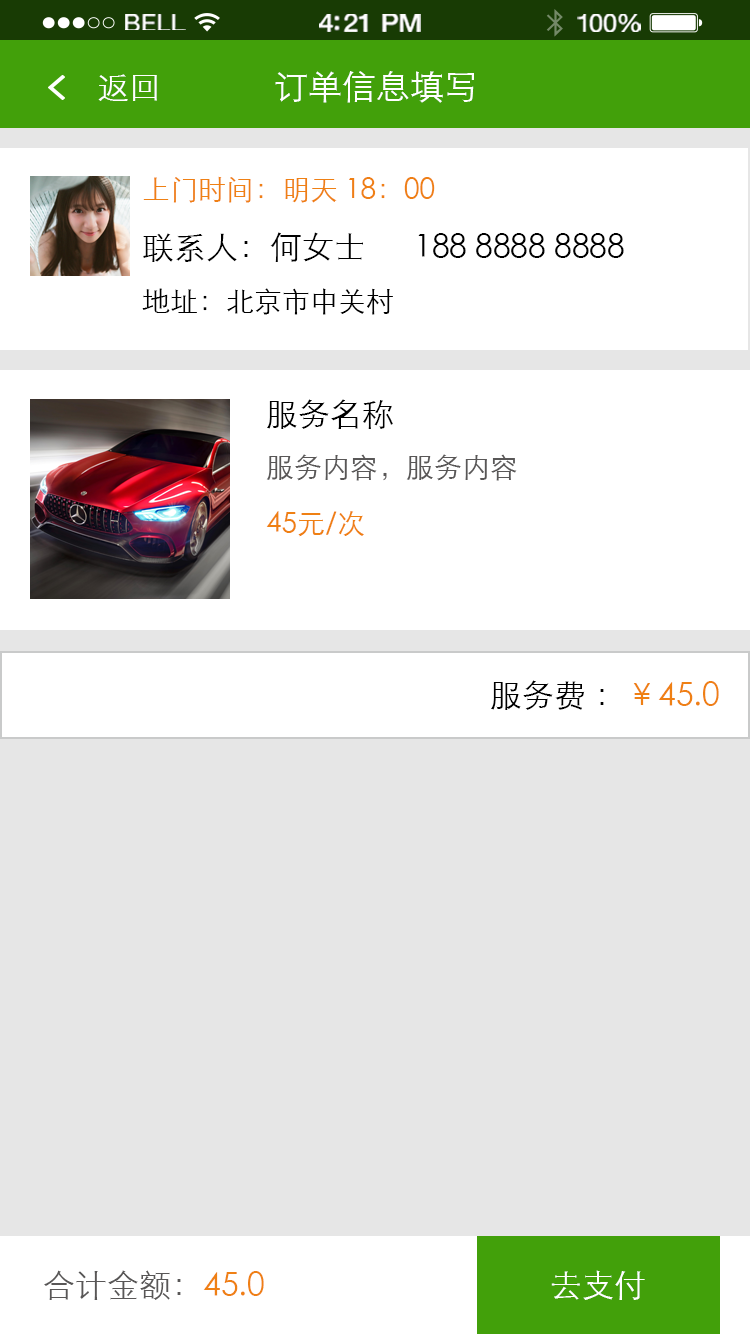
<style>
.page{position:relative;width:750px;height:1334px;background:#e6e6e6}
.page>*{position:absolute;margin:0}
.t1{font:23.3px "HelveticaNeue";letter-spacing:0.02em;color:#ffffff;scale:1.06 1}
.t2{font:25.3px "HelveticaNeue-Medium";letter-spacing:-0.02em;color:#ffffff;scale:1.06 1}
.t3{font:24.3px "HelveticaNeue";letter-spacing:-0.02em;color:#ffffff;scale:1.06 1}
.t4{font:32px "STXihei";color:#ffffff}
.t5{font:34px "STXihei";color:#ffffff}
.t6{font:32px/56px "STXihei";color:#000000}
.t7{font:28px/56px "STXihei";color:#ef8014}
.t8{font:28px/56px "STXihei";color:#000000}
.t9{font:28px/56px "STXihei";color:#595757}
.t10{font:28px/56px "STXihei";color:#ef8013}
.t11{font:32px "STXihei";color:#000000}
.t12{font:32px "STXihei";color:#ef8014}
.t13{font:32px "STXihei";color:#595757}
</style>
<div class="page">
<p class="t1" style="left:125px;top:14px;width:61px;height:16px">BELL</p>
<p class="t2" style="left:319px;top:14px;width:102px;height:18px">4:21 PM</p>
<p class="t3" style="left:577px;top:14px;width:64px;height:18px">100%</p>
<p class="t4" style="left:98px;top:74px;width:59px;height:27px">返回</p>
<p class="t5" style="left:275px;top:71px;width:199px;height:32px">订单信息填写</p>
<p class="t6" style="left:142px;top:176px;width:482px;height:139px"><span class="t7">上门时间：明天 18：00<br></span>联系人：何女士      188 8888 8888<br><span class="t8">地址：北京市中关村</span></p>
<p class="t9" style="left:266px;top:399px;width:251px;height:138px"><span class="t6">服务名称<br></span>服务内容，服务内容<br><span class="t10">45元/次</span></p>
<p class="t11" style="left:491px;top:680px;width:228px;height:30px">服务费 ：<span class="t12">￥45.0</span></p>
<p class="t13" style="left:44px;top:1270px;width:220px;height:30px">合计金额：<span class="t12">45.0</span></p>
<p class="t4" style="left:551px;top:1270px;width:94px;height:30px">去支付</p>
</div>
